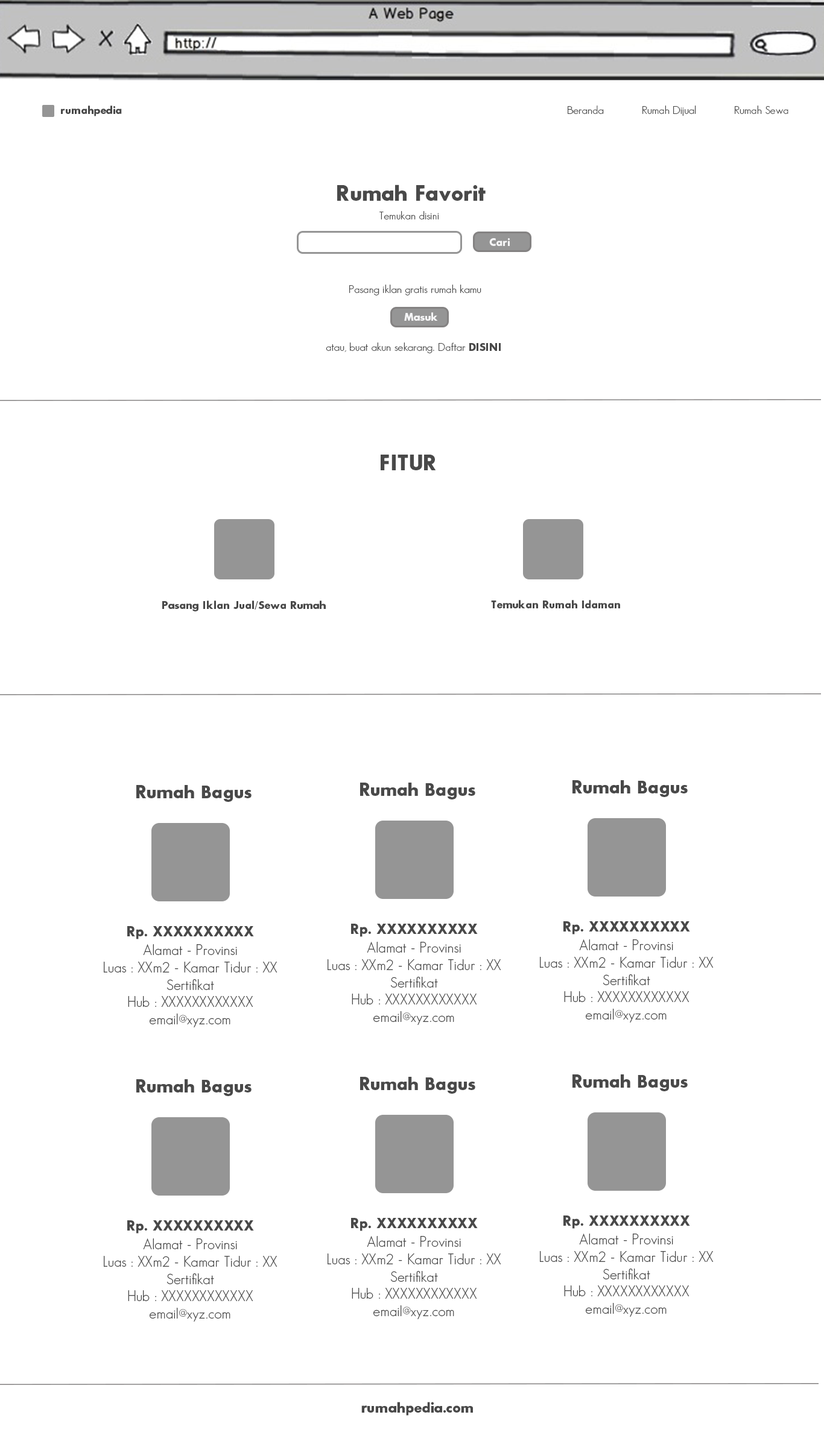
<style>
.page{position:relative;width:824px;height:1447px;background:#ffffff}
.page>*{position:absolute;margin:0}
.t1{font:10.9px "SansSerifBldFLF";color:#494949}
.t2{font:10.9px "SansSerifFLF";color:#494949}
.t3{font:21.7px "SansSerifBldFLF";color:#494949}
.t4{font:10.9px "SansSerifBldFLF";color:#f5f5f6}
.t5{font:18.1px "SansSerifBldFLF";color:#494949}
.t6{font:14.5px "SansSerifBldFLF";color:#494949}
.t7{font:14.5px "SansSerifFLF";color:#494949}
</style>
<div class="page">
<p class="t1" style="left:61px;top:106px;width:61px;height:10px">rumahpedia</p>
<p class="t2" style="left:568px;top:106px;width:36px;height:8px">Beranda</p>
<p class="t2" style="left:642px;top:106px;width:54px;height:10px">Rumah Dijual</p>
<p class="t2" style="left:735px;top:106px;width:53px;height:8px">Rumah Sewa</p>
<p class="t3" style="left:337px;top:185px;width:148px;height:16px">Rumah Favorit</p>
<p class="t2" style="left:379px;top:211px;width:60px;height:9px">Temukan disini</p>
<p class="t4" style="left:489px;top:238px;width:21px;height:8px">Cari</p>
<p class="t2" style="left:349px;top:285px;width:132px;height:11px">Pasang iklan gratis rumah kamu</p>
<p class="t4" style="left:404px;top:312px;width:34px;height:9px">Masuk</p>
<p class="t2" style="left:326px;top:343px;width:175px;height:10px">atau, buat akun sekarang. Daftar <span class="t1">DISINI</span></p>
<p class="t3" style="left:381px;top:455px;width:55px;height:15px">FITUR</p>
<p class="t1" style="left:162px;top:601px;width:164px;height:11px">Pasang Iklan Jual/Sewa Rumah</p>
<p class="t1" style="left:491px;top:600px;width:129px;height:9px">Temukan Rumah Idaman</p>
<p class="t5" style="left:136px;top:785px;width:115px;height:17px">Rumah Bagus</p>
<p class="t5" style="left:360px;top:783px;width:115px;height:17px">Rumah Bagus</p>
<p class="t5" style="left:572px;top:780px;width:116px;height:17px">Rumah Bagus</p>
<p class="t6" style="left:127px;top:926px;width:127px;height:14px">Rp. XXXXXXXXXX</p>
<p class="t6" style="left:351px;top:924px;width:127px;height:13px">Rp. XXXXXXXXXX</p>
<p class="t6" style="left:563px;top:922px;width:127px;height:13px">Rp. XXXXXXXXXX</p>
<p class="t7" style="left:540px;top:940px;width:173px;height:83px;text-align:center">Alamat - Provinsi<br>Luas : XXm2 - Kamar Tidur : XX<br>Sertifikat<br>Hub : XXXXXXXXXXXX<br>email@xyz.com</p>
<p class="t7" style="left:104px;top:944px;width:173px;height:84px;text-align:center">Alamat - Provinsi<br>Luas : XXm2 - Kamar Tidur : XX<br>Sertifikat<br>Hub : XXXXXXXXXXXX<br>email@xyz.com</p>
<p class="t7" style="left:327px;top:942px;width:174px;height:83px;text-align:center">Alamat - Provinsi<br>Luas : XXm2 - Kamar Tidur : XX<br>Sertifikat<br>Hub : XXXXXXXXXXXX<br>email@xyz.com</p>
<p class="t5" style="left:136px;top:1080px;width:115px;height:16px">Rumah Bagus</p>
<p class="t5" style="left:360px;top:1077px;width:115px;height:17px">Rumah Bagus</p>
<p class="t5" style="left:572px;top:1075px;width:116px;height:17px">Rumah Bagus</p>
<p class="t6" style="left:563px;top:1216px;width:127px;height:13px">Rp. XXXXXXXXXX</p>
<p class="t6" style="left:127px;top:1221px;width:127px;height:13px">Rp. XXXXXXXXXX</p>
<p class="t6" style="left:351px;top:1218px;width:127px;height:14px">Rp. XXXXXXXXXX</p>
<p class="t7" style="left:104px;top:1239px;width:173px;height:83px;text-align:center">Alamat - Provinsi<br>Luas : XXm2 - Kamar Tidur : XX<br>Sertifikat<br>Hub : XXXXXXXXXXXX<br>email@xyz.com</p>
<p class="t7" style="left:327px;top:1236px;width:174px;height:84px;text-align:center">Alamat - Provinsi<br>Luas : XXm2 - Kamar Tidur : XX<br>Sertifikat<br>Hub : XXXXXXXXXXXX<br>email@xyz.com</p>
<p class="t7" style="left:540px;top:1234px;width:173px;height:83px;text-align:center">Alamat - Provinsi<br>Luas : XXm2 - Kamar Tidur : XX<br>Sertifikat<br>Hub : XXXXXXXXXXXX<br>email@xyz.com</p>
<p class="t6" style="left:361px;top:1402px;width:112px;height:14px">rumahpedia.com</p>
</div>
